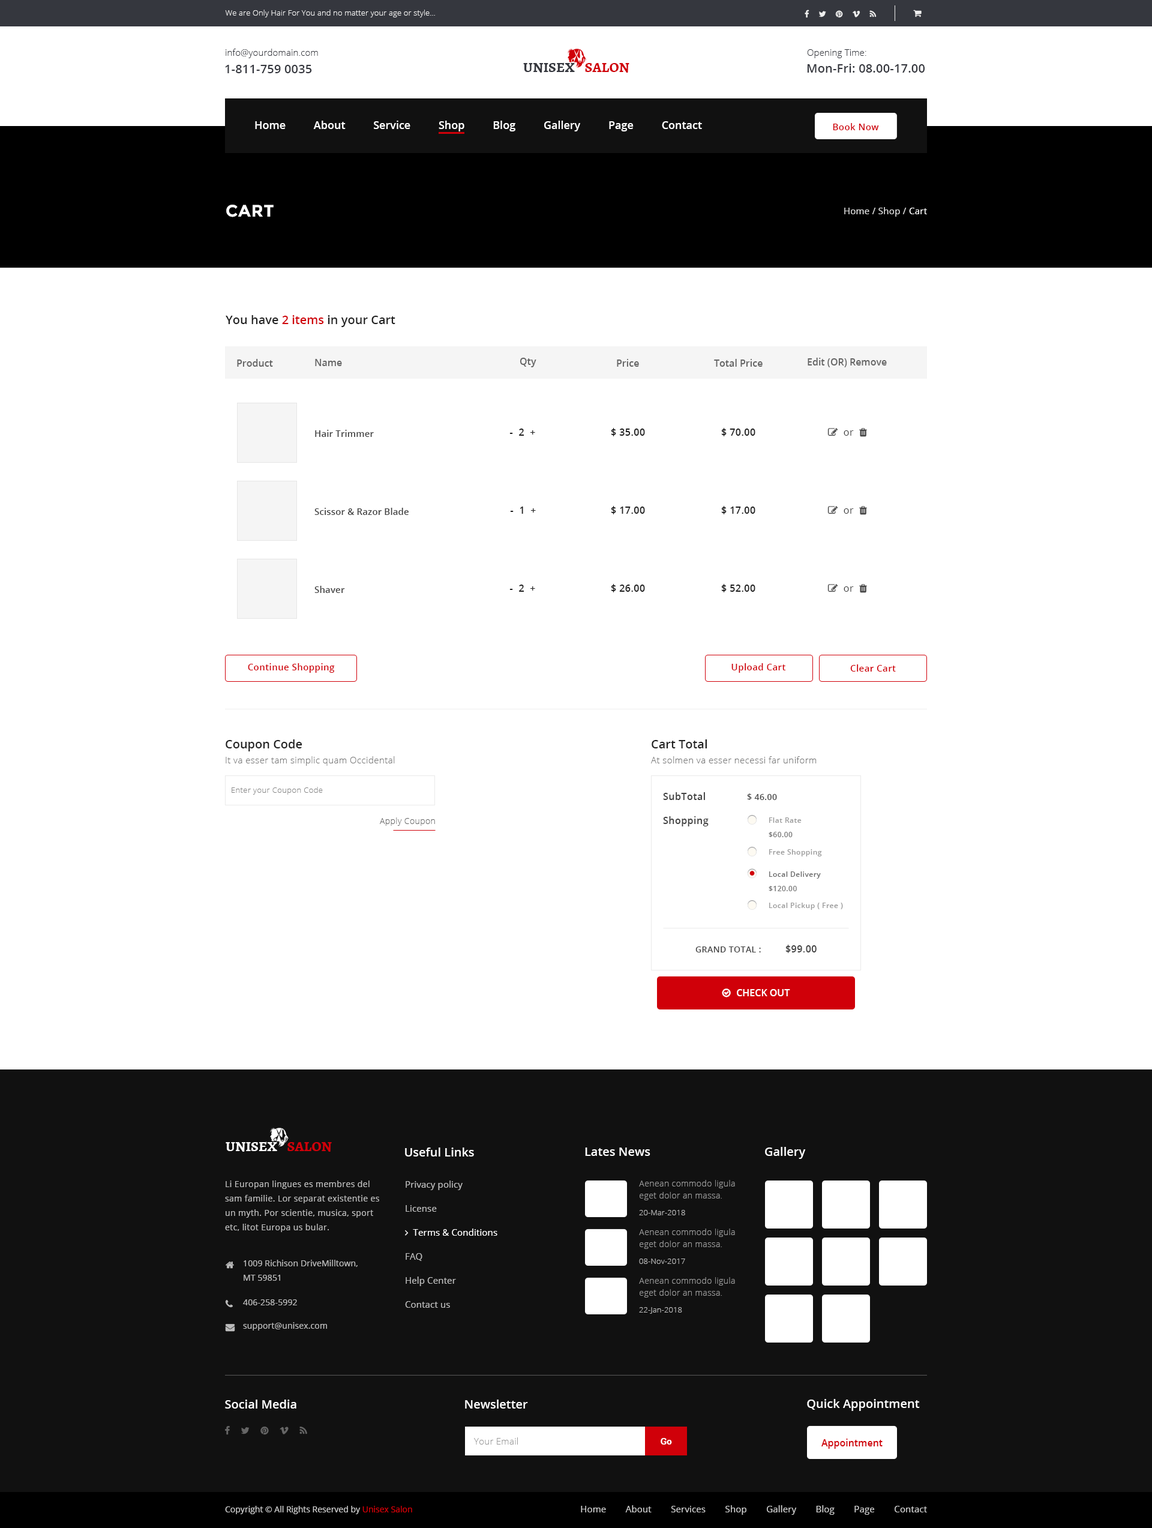
<style>
.page{position:relative;width:1152px;height:1528px;background:#ffffff}
.page>*{position:absolute;margin:0}
.t1{font:7.8px "OpenSans-Light";letter-spacing:0.01em;color:#efefef}
.t2{font:9px "OpenSans-Light";letter-spacing:0.01em;color:#35373e}
.t3{font:12px "OpenSans-Semibold";letter-spacing:0.01em;color:#35373e}
.t4{font:14.4px "Alegreya-Bold";color:#35373e;text-transform:uppercase}
.t5{font:14.4px "Alegreya-Bold";color:#d00009;text-transform:uppercase}
.t6{font:10.8px "OpenSans-Semibold";color:#ffffff}
.t7{font:9px "OpenSans-Semibold";letter-spacing:0.03em;color:#d00009}
.t8{font:16.8px "Montserrat-Bold";letter-spacing:0.02em;color:#ffffff;text-transform:uppercase}
.t9{font:9px "OpenSans";letter-spacing:0.02em;color:#dddddd}
.t10{font:9px "OpenSans";letter-spacing:0.02em;color:#ffffff}
.t11{font:12px "OpenSans-Semibold";color:#222222}
.t12{font:12px "OpenSans-Semibold";color:#d00009}
.t13{font:9.6px "OpenSans-Semibold";color:#666666}
.t14{font:9px "OpenSans-Semibold";letter-spacing:0.01em;color:#444444}
.t15{font:9.6px "OpenSans-Semibold";letter-spacing:0.03em;color:#222222}
.t16{font:9px "OpenSans-Light";letter-spacing:0.03em;color:#777777}
.t17{font:7.8px "OpenSans-Light";letter-spacing:0.03em;color:#888888}
.t18{font:9.6px "OpenSans-Semibold";letter-spacing:0.03em;color:#444444}
.t19{font:8.4px "OpenSans-Semibold";letter-spacing:0.03em;color:#444444;text-transform:uppercase}
.t20{font:8.4px "OpenSans-Light";letter-spacing:0.03em;color:#666666}
.t21{font:7.2px "OpenSans-Semibold";letter-spacing:0.04em;color:#999999}
.t22{font:7.2px "OpenSans-Semibold";letter-spacing:0.04em;color:#777777}
.t23{font:7.2px "OpenSans-Semibold";letter-spacing:0.04em;color:#666666}
.t24{font:9.6px "OpenSans-Semibold";letter-spacing:0.03em;color:#444444;text-transform:uppercase}
.t25{font:14.4px "Alegreya-Bold";color:#ffffff;text-transform:uppercase}
.t26{font:12px "OpenSans-Semibold";color:#ffffff}
.t27{font:8.4px/14.4px "OpenSans";letter-spacing:0.03em;color:#bbbbbb}
.t28{font:8.4px/12px "OpenSans-Light";letter-spacing:0.03em;color:#999999}
.t29{font:7.8px "OpenSans-Light";letter-spacing:0.01em;color:#bbbbbb}
.t30{font:8.4px/14.4px "OpenSans";letter-spacing:0.01em;color:#bbbbbb}
.t31{font:8.4px "OpenSans";letter-spacing:0.01em;color:#bbbbbb}
.t32{font:9px "OpenSans-Light";letter-spacing:0.02em;color:#999999}
.t33{font:9px "RobotoSlab-Bold";letter-spacing:0.02em;color:#ffffff}
.t34{font:9.6px "OpenSans-Semibold";color:#d00009}
.t35{font:8.4px "OpenSans";color:#cccccc}
.t36{font:8.4px "OpenSans";color:#d00009}
.t37{font:9px "OpenSans";letter-spacing:0.01em;color:#cccccc}
</style>
<div class="page">
<p class="t1" style="left:225px;top:10px;width:210px;height:7px">We are Only Hair For You and no matter your age or style...</p>
<p class="t2" style="left:226px;top:49px;width:92px;height:9px">info@yourdomain.com</p>
<p class="t2" style="left:807px;top:49px;width:59px;height:9px">Opening Time:</p>
<p class="t3" style="left:225px;top:65px;width:87px;height:8px">1-811-759 0035</p>
<p class="t4" style="left:523px;top:62px;width:106px;height:11px">Unisex    <span class="t5">Salon</span></p>
<p class="t3" style="left:807px;top:64px;width:118px;height:9px">Mon-Fri: 08.00-17.00</p>
<p class="t6" style="left:255px;top:121px;width:447px;height:10px">Home          About          Service          Shop          Blog          Gallery          Page          Contact</p>
<p class="t7" style="left:833px;top:123px;width:46px;height:7px">Book Now</p>
<p class="t8" style="left:226px;top:205px;width:48px;height:12px">Cart</p>
<p class="t9" style="left:844px;top:207px;width:83px;height:10px">Home / Shop / <span class="t10">Cart</span></p>
<p class="t11" style="left:226px;top:315px;width:169px;height:12px">You have <span class="t12">2 items</span> in your Cart</p>
<p class="t13" style="left:237px;top:359px;width:36px;height:8px">Product</p>
<p class="t13" style="left:315px;top:359px;width:27px;height:7px">Name</p>
<p class="t13" style="left:520px;top:358px;width:16px;height:9px">Qty</p>
<p class="t13" style="left:617px;top:359px;width:22px;height:8px">Price</p>
<p class="t13" style="left:714px;top:359px;width:49px;height:8px">Total Price</p>
<p class="t13" style="left:808px;top:358px;width:79px;height:9px">Edit (OR) Remove</p>
<p class="t14" style="left:315px;top:430px;width:59px;height:7px">Hair Trimmer</p>
<p class="t15" style="left:509px;top:428px;width:26px;height:8px">-  2  +</p>
<p class="t15" style="left:611px;top:428px;width:34px;height:8px">$ 35.00</p>
<p class="t15" style="left:721px;top:428px;width:34px;height:8px">$ 70.00</p>
<p class="t14" style="left:314px;top:508px;width:95px;height:7px">Scissor &amp; Razor Blade</p>
<p class="t15" style="left:510px;top:506px;width:26px;height:8px">-  1  +</p>
<p class="t15" style="left:611px;top:506px;width:34px;height:8px">$ 17.00</p>
<p class="t15" style="left:721px;top:506px;width:34px;height:8px">$ 17.00</p>
<p class="t14" style="left:314px;top:586px;width:31px;height:7px">Shaver</p>
<p class="t15" style="left:509px;top:584px;width:26px;height:8px">-  2  +</p>
<p class="t15" style="left:611px;top:584px;width:34px;height:8px">$ 26.00</p>
<p class="t15" style="left:721px;top:584px;width:34px;height:8px">$ 52.00</p>
<p class="t7" style="left:248px;top:663px;width:87px;height:10px">Continue Shopping</p>
<p class="t7" style="left:731px;top:663px;width:55px;height:10px">Upload Cart</p>
<p class="t7" style="left:850px;top:664px;width:46px;height:7px">Clear Cart</p>
<p class="t11" style="left:226px;top:739px;width:76px;height:12px">Coupon Code</p>
<p class="t11" style="left:652px;top:739px;width:55px;height:9px">Cart Total</p>
<p class="t16" style="left:226px;top:756px;width:169px;height:10px">It va esser tam simplic quam Occidental</p>
<p class="t16" style="left:651px;top:756px;width:166px;height:7px">At solmen va esser necessi far uniform</p>
<p class="t17" style="left:232px;top:787px;width:91px;height:7px">Enter your Coupon Code</p>
<p class="t18" style="left:663px;top:792px;width:42px;height:8px">SubTotal</p>
<p class="t19" style="left:747px;top:793px;width:30px;height:7px">$ 46.00</p>
<p class="t20" style="left:380px;top:817px;width:55px;height:9px">Apply Coupon</p>
<p class="t18" style="left:663px;top:816px;width:46px;height:10px">Shopping</p>
<p class="t21" style="left:769px;top:817px;width:33px;height:6px">Flat Rate</p>
<p class="t22" style="left:769px;top:832px;width:24px;height:5px">$60.00</p>
<p class="t21" style="left:769px;top:849px;width:53px;height:7px">Free Shopping</p>
<p class="t23" style="left:769px;top:871px;width:52px;height:7px">Local Delivery</p>
<p class="t22" style="left:769px;top:886px;width:28px;height:5px">$120.00</p>
<p class="t21" style="left:769px;top:902px;width:74px;height:8px">Local Pickup ( Free )</p>
<p class="t19" style="left:695px;top:946px;width:66px;height:6px">Grand total :</p>
<p class="t24" style="left:785px;top:944px;width:32px;height:9px">$99.00</p>
<p class="t25" style="left:226px;top:1141px;width:106px;height:10px">Unisex    <span class="t5">Salon</span></p>
<p class="t26" style="left:405px;top:1147px;width:69px;height:9px">Useful Links</p>
<p class="t26" style="left:585px;top:1147px;width:65px;height:9px">Lates News</p>
<p class="t26" style="left:765px;top:1147px;width:41px;height:12px">Gallery</p>
<p class="t27" style="left:225px;top:1180px;width:154px;height:52px">Li Europan lingues es membres del sam familie. Lor separat existentie es un myth. Por scientie, musica, sport etc, litot Europa us bular.</p>
<p class="t28" style="left:639px;top:1180px;width:96px;height:20px">Aenean commodo ligula eget dolor an massa.</p>
<p class="t29" style="left:639px;top:1210px;width:46px;height:5px">20-Mar-2018</p>
<p class="t28" style="left:639px;top:1228px;width:96px;height:21px">Aenean commodo ligula eget dolor an massa.</p>
<p class="t30" style="left:244px;top:1259px;width:114px;height:21px">1009 Richison DriveMilltown, <br>MT 59851</p>
<p class="t29" style="left:639px;top:1258px;width:46px;height:6px">08-Nov-2017</p>
<p class="t28" style="left:639px;top:1277px;width:96px;height:20px">Aenean commodo ligula eget dolor an massa.</p>
<p class="t31" style="left:243px;top:1299px;width:54px;height:6px">406-258-5992</p>
<p class="t29" style="left:639px;top:1307px;width:43px;height:6px">22-Jan-2018</p>
<p class="t31" style="left:243px;top:1322px;width:84px;height:8px">support@unisex.com</p>
<p class="t26" style="left:225px;top:1399px;width:71px;height:9px">Social Media</p>
<p class="t26" style="left:465px;top:1399px;width:63px;height:9px">Newsletter</p>
<p class="t26" style="left:807px;top:1399px;width:113px;height:12px">Quick Appointment</p>
<p class="t32" style="left:474px;top:1437px;width:44px;height:7px">Your Email</p>
<p class="t33" style="left:661px;top:1438px;width:11px;height:6px">Go</p>
<p class="t34" style="left:821px;top:1438px;width:62px;height:10px">Appointment</p>
<p class="t35" style="left:225px;top:1505px;width:187px;height:9px">Copyright © All Rights Reserved by <span class="t36">Unisex Salon</span></p>
<p class="t37" style="left:581px;top:1505px;width:346px;height:9px">Home        About        Services        Shop        Gallery        Blog        Page        Contact</p>
</div>
